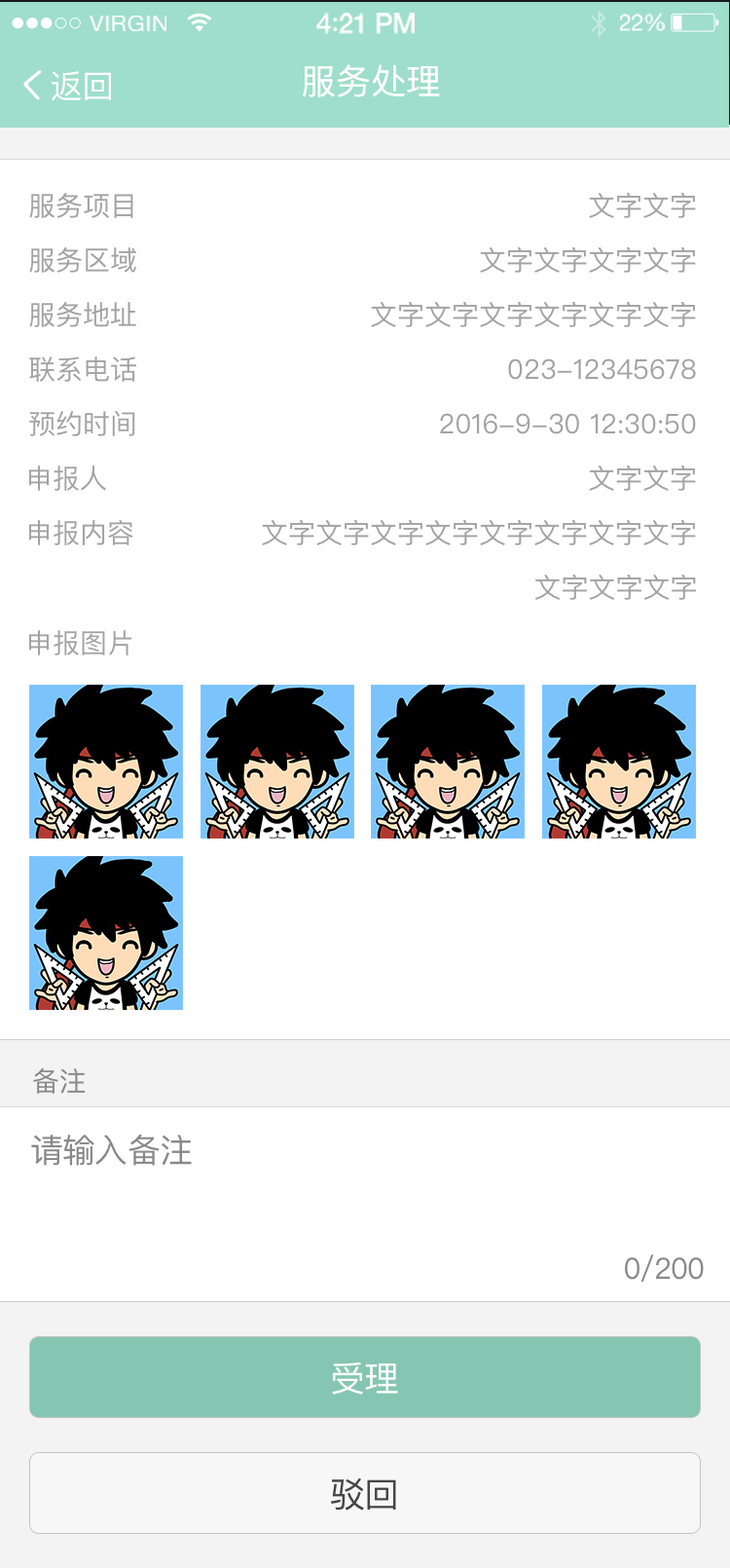
<style>
.page{position:relative;width:730px;height:1568px;background:#ffffff}
.page>*{position:absolute;margin:0}
.t1{font:22.8px "HelveticaNeue";letter-spacing:0.02em;color:#ffffff}
.t2{font:27.4px "HelveticaNeue-Medium";letter-spacing:-0.02em;color:#ffffff}
.t3{font:27.4px "Avenir-Medium";letter-spacing:-0.02em;color:#ffffff}
.t4{font:22.9px "HelveticaNeue";letter-spacing:-0.02em;color:#ffffff}
.t5{font:35.1px "PingFangSC-Medium";color:#ffffff}
.t6{font:32.4px "PingFangSC-Medium";color:#ffffff}
.t7{font:27.3px "PingFangSC-Regular";color:#a3a3a3}
.t8{font:27.3px "PingFangSC-Regular";letter-spacing:-0.026em;color:#888888}
.t9{font:33.1px "PingFangSC-Regular";letter-spacing:-0.026em;color:#888888}
.t10{font:29.2px "PingFangSC-Regular";letter-spacing:-0.026em;color:#888888}
.t11{font:35.1px "PingFangSC-Regular";letter-spacing:-0.026em;color:#ffffff}
.t12{font:35.1px "PingFangSC-Regular";letter-spacing:-0.026em;color:#454545}
</style>
<div class="page">
<p class="t1" style="left:88px;top:16px;width:79px;height:15px">VIRGIN</p>
<p class="t2" style="left:317px;top:13px;width:98px;height:21px">4<span class="t3">:</span>21 PM</p>
<p class="t4" style="left:620px;top:13px;width:45px;height:18px">22%</p>
<p class="t5" style="left:302px;top:64px;width:138px;height:33px">服务处理</p>
<p class="t5" style="left:303px;top:64px;width:137px;height:33px">服务处理</p>
<p class="t6" style="left:52px;top:71px;width:59px;height:30px">返回</p>
<p class="t7" style="left:29px;top:193px;width:104px;height:25px">服务项目</p>
<p class="t7" style="left:589px;top:193px;width:107px;height:25px">文字文字</p>
<p class="t7" style="left:29px;top:247px;width:107px;height:26px">服务区域</p>
<p class="t7" style="left:480px;top:247px;width:216px;height:26px">文字文字文字文字</p>
<p class="t7" style="left:29px;top:302px;width:107px;height:25px">服务地址</p>
<p class="t7" style="left:371px;top:302px;width:325px;height:25px">文字文字文字文字文字文字</p>
<p class="t7" style="left:29px;top:356px;width:107px;height:26px">联系电话</p>
<p class="t7" style="left:508px;top:358px;width:188px;height:22px">023-12345678</p>
<p class="t7" style="left:29px;top:411px;width:106px;height:25px">预约时间</p>
<p class="t7" style="left:440px;top:413px;width:256px;height:21px">2016-9-30 12:30:50</p>
<p class="t7" style="left:29px;top:466px;width:77px;height:25px">申报人</p>
<p class="t7" style="left:589px;top:466px;width:107px;height:25px">文字文字</p>
<p class="t7" style="left:29px;top:520px;width:104px;height:25px">申报内容</p>
<p class="t7" style="left:262px;top:520px;width:434px;height:25px">文字文字文字文字文字文字文字文字</p>
<p class="t7" style="left:535px;top:575px;width:161px;height:25px">文字文字文字</p>
<p class="t7" style="left:29px;top:630px;width:103px;height:25px">申报图片</p>
<p class="t8" style="left:33px;top:1067px;width:53px;height:27px">备注</p>
<p class="t9" style="left:31px;top:1134px;width:161px;height:32px">请输入备注</p>
<p class="t10" style="left:625px;top:1254px;width:79px;height:28px">0/200</p>
<p class="t11" style="left:332px;top:1362px;width:66px;height:33px">受理</p>
<p class="t12" style="left:331px;top:1477px;width:65px;height:34px">驳回</p>
</div>
